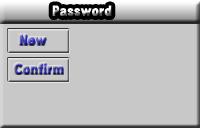
<style>
.page{position:relative;width:200px;height:128px;background:#c8c8c8}
.page>*{position:absolute;margin:0}
.t1{font:14px "GothicXB-HM"}
</style>
<div class="page">
<p class="t1" style="left:52px;top:5px;width:60px;height:11px">Password</p>
<p class="t1" style="left:19px;top:34px;width:27px;height:11px">New</p>
<p class="t1" style="left:14px;top:63px;width:49px;height:11px">Confirm</p>
</div>
